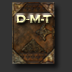
<style>
.page{position:relative;width:72px;height:72px;background:#333333}
.page>*{position:absolute;margin:0}
.t1{font:12px "CopperplateGothic-Bold"}
.t2{font:12px "MyriadPro-Regular"}
</style>
<div class="page">
<p class="t1" style="left:16px;top:15px;width:36px;height:8px">D<span class="t2">-</span>M-T</p>
</div>
